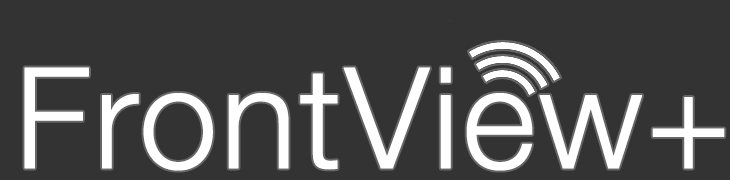
<style>
.page{position:relative;width:730px;height:180px;background:#333333}
.page>*{position:absolute;margin:0}
.t1{font:140px "HelveticaNeueLTPro-Lt";color:#ffffff;font-weight:bold}
</style>
<div class="page">
<p class="t1" style="left:24px;top:67px;width:701px;height:104px">+FrontView</p>
</div>
